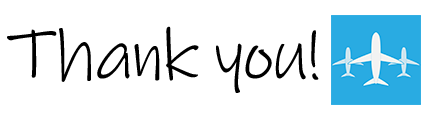
<style>
.page{position:relative;width:440px;height:120px;background:#ffffff}
.page>*{position:absolute;margin:0}
.t1{font:72px "InkFree";letter-spacing:-0.025em;color:#000000}
</style>
<div class="page">
<p class="t1" style="left:7px;top:26px;width:312px;height:67px">Thank you!</p>
</div>
